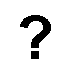
<style>
.page{position:relative;width:70px;height:70px;background:#ffffff}
.page>*{position:absolute;margin:0}
.t1{font:60px "Arial-BoldMT";color:#000000}
</style>
<div class="page">
<p class="t1" style="left:20px;top:15px;width:31px;height:44px">?</p>
</div>
